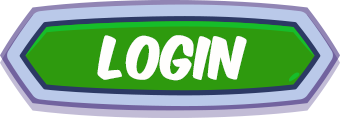
<style>
.page{position:relative;width:340px;height:118px;background:#2e9a0e}
.page>*{position:absolute;margin:0}
.t1{font:50px "KomikaAxis";color:#fffefd}
</style>
<div class="page">
<p class="t1" style="left:97px;top:35px;width:150px;height:46px">Login</p>
</div>
